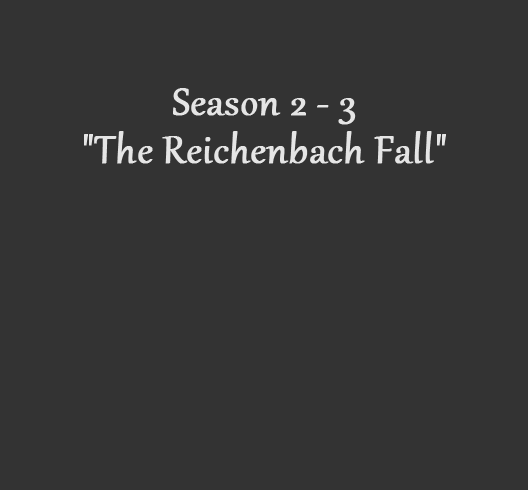
<style>
.page{position:relative;width:528px;height:490px;background:#333333}
.page>*{position:absolute;margin:0}
.t1{font:48px/48px "Gabriola";color:#e5e5e5;font-weight:bold}
</style>
<div class="page">
<p class="t1" style="left:84px;top:88px;width:362px;height:76px;text-align:center">Season 2 - 3<br>"The Reichenbach Fall"</p>
</div>
